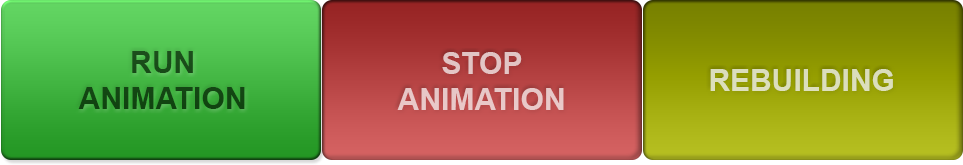
<style>
.page{position:relative;width:963px;height:165px}
.page>*{position:absolute;margin:0}
.t1{font:30px "Arial-BoldMT";color:#134613}
.t2{font:30px "Arial-BoldMT";color:#e7c7c7}
.t3{font:30px "Arial-BoldMT";color:#dbdebc}
</style>
<div class="page">
<p class="t1" style="left:78px;top:51px;width:167px;height:58px;text-align:center">RUN<br>ANIMATION</p>
<p class="t2" style="left:397px;top:52px;width:167px;height:58px;text-align:center">STOP<br>ANIMATION</p>
<p class="t3" style="left:710px;top:69px;width:183px;height:22px">REBUILDING</p>
</div>
